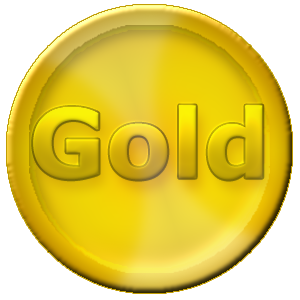
<style>
.page{position:relative;width:300px;height:300px;background:#ffffff}
.page>*{position:absolute;margin:0}
.t1{font:95.2px "Verdana-Bold";color:#a98f02}
</style>
<div class="page">
<p class="t1" style="left:33px;top:105px;width:230px;height:75px;opacity:0.74">Gold</p>
</div>
